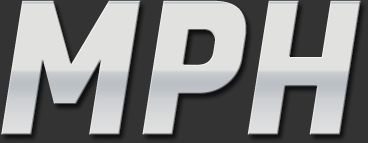
<style>
.page{position:relative;width:368px;height:143px;background:#333333}
.page>*{position:absolute;margin:0}
.t1{font:185.2px "FugazOne-Regular";color:#dfdfdf;scale:0.89 1}
</style>
<div class="page">
<p class="t1" style="left:1px;top:0px;width:360px;height:135px">MPH</p>
</div>
